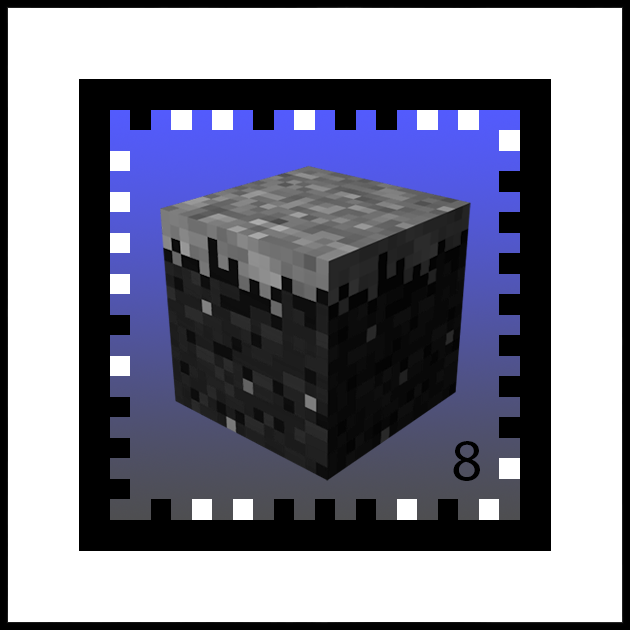
<style>
.page{position:relative;width:630px;height:630px;background:#ffffff}
.page>*{position:absolute;margin:0}
.t1{font:61.1px "MyriadPro-Regular";color:#000000;font-variant:small-caps}
</style>
<div class="page">
<p class="t1" style="left:453px;top:441px;width:27px;height:40px">8</p>
</div>
